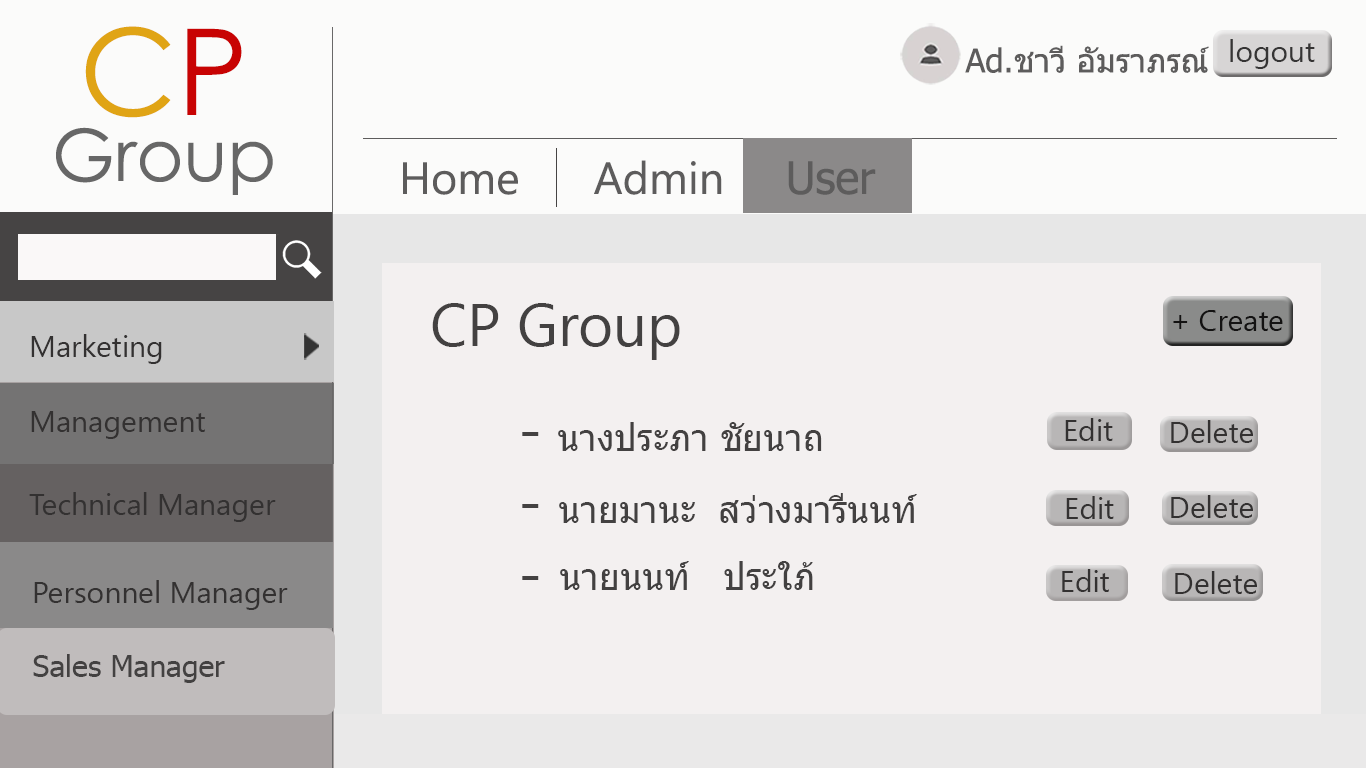
<style>
.page{position:relative;width:1366px;height:768px;background:#f3f0f0}
.page>*{position:absolute;margin:0}
.t1{font:120px "CenturyGothic";color:#e0a415}
.t2{font:120px "CenturyGothic";color:#c80303}
.t3{font:30px "SegoeUI";color:#353434}
.t4{font:33px "Tahoma";color:#5d5c5c}
.t5{font:72px "CenturyGothic";color:#676767}
.t6{font:45px "SegoeUI";color:#5d5c5c}
.t7{font:45px "Tahoma";color:#5d5c5c}
.t8{font:60px "SegoeUI";color:#434141}
.t9{font:30px "SegoeUI";color:#131212}
.t10{font:30px "SegoeUI";color:#333131}
.t11{font:36px "Tahoma";color:#434141}
.t12{font:30px "Tahoma";color:#434141}
</style>
<div class="page">
<p class="t1" style="left:85px;top:26px;width:157px;height:92px">C<span class="t2">P</span></p>
<p class="t3" style="left:1230px;top:39px;width:85px;height:30px">logout</p>
<p class="t4" style="left:965px;top:45px;width:244px;height:28px">Ad.ชาวี อัมราภรณ์</p>
<p class="t5" style="left:56px;top:127px;width:217px;height:68px">Group</p>
<p class="t6" style="left:403px;top:160px;width:473px;height:35px">Home      Admin     <span class="t7">User</span></p>
<p class="t8" style="left:432px;top:303px;width:248px;height:57px">CP Group</p>
<p class="t9" style="left:1173px;top:310px;width:110px;height:21px">+ Create</p>
<p class="t10" style="left:31px;top:334px;width:131px;height:30px">Marketing</p>
<p class="t10" style="left:31px;top:411px;width:174px;height:28px">Management</p>
<p class="t11" style="left:558px;top:422px;width:264px;height:29px">นางประภา ชัยนาถ</p>
<p class="t10" style="left:1065px;top:418px;width:48px;height:23px">Edit</p>
<p class="t10" style="left:1171px;top:420px;width:82px;height:23px">Delete</p>
<p class="t8" style="left:522px;top:432px;width:17px;height:148px">-<br>-<br>-</p>
<p class="t10" style="left:29px;top:492px;width:247px;height:30px">Technical Manager</p>
<p class="t11" style="left:559px;top:493px;width:358px;height:30px">นายมานะ  สว่างมารีนนท์</p>
<p class="t10" style="left:1066px;top:496px;width:48px;height:23px">Edit</p>
<p class="t10" style="left:1171px;top:495px;width:82px;height:23px">Delete</p>
<p class="t11" style="left:560px;top:561px;width:253px;height:29px">นายนนท์   ประใภ้</p>
<p class="t10" style="left:1062px;top:569px;width:47px;height:23px">Edit</p>
<p class="t10" style="left:34px;top:580px;width:254px;height:30px">Personnel Manager</p>
<p class="t10" style="left:1175px;top:571px;width:82px;height:23px">Delete</p>
<p class="t12" style="left:33px;top:654px;width:192px;height:29px">Sales Manager</p>
</div>
